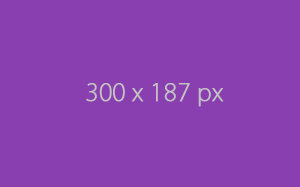
<style>
.page{position:relative;width:300px;height:187px;background:#8a3fb1}
.page>*{position:absolute;margin:0}
.t1{font:23.9px "KozGoPro-ExtraLight";color:#c3c3c3;font-weight:bold}
</style>
<div class="page">
<p class="t1" style="left:86px;top:83px;width:138px;height:24px">300 x 187 px</p>
</div>
